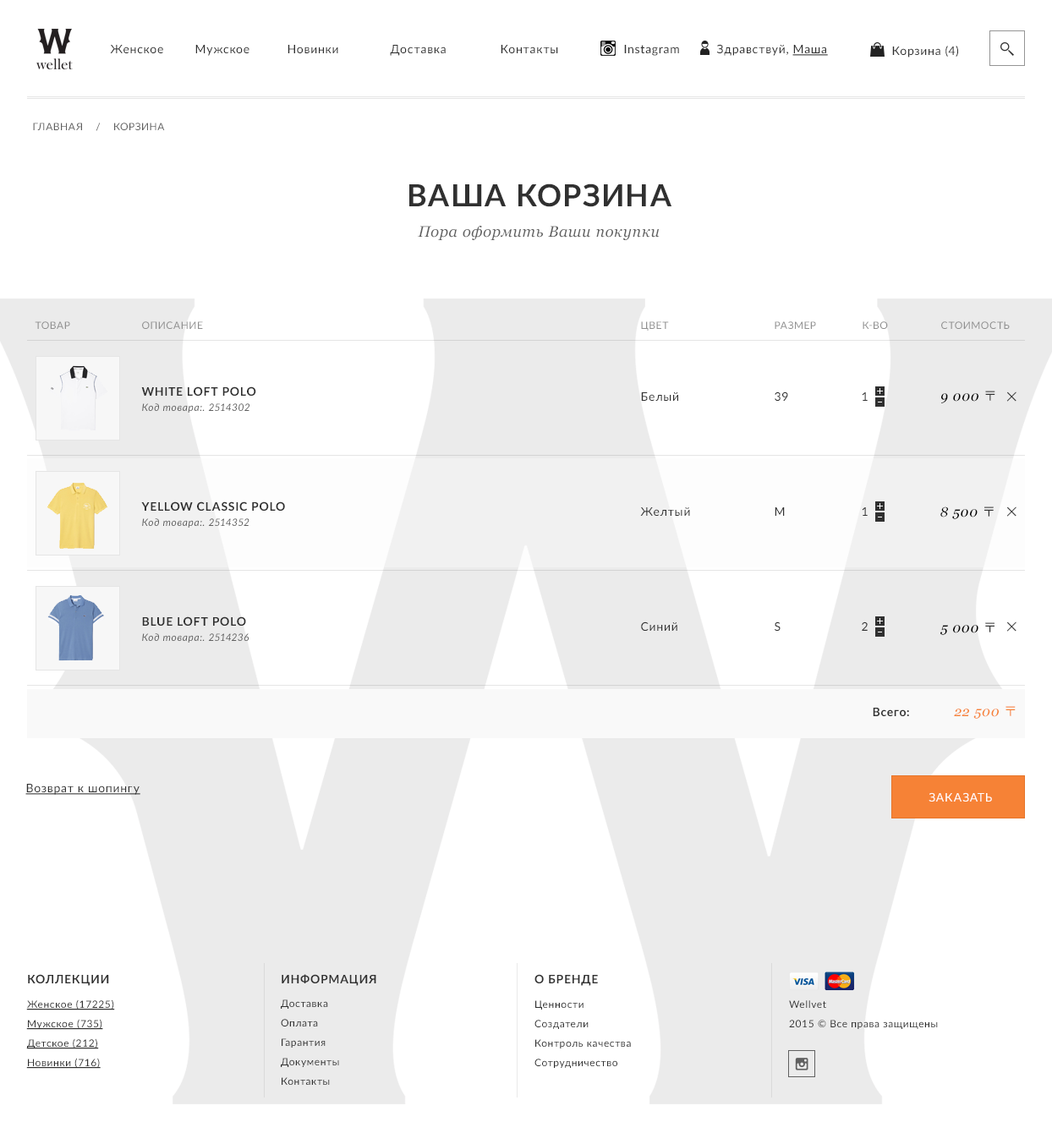
<style>
.page{position:relative;width:1052px;height:1133px;background:#ffffff}
.page>*{position:absolute;margin:0}
.t1{font:11.8px "Lato-Regular";letter-spacing:0.05em;color:#303030}
.t2{font:11.8px "Lato-Regular";letter-spacing:0.05em;color:#303030;text-decoration:underline}
.t3{font:10.1px "Lato-Regular";letter-spacing:0.05em;color:#606060;text-transform:uppercase}
.t4{font:15.2px/30.4px "Georgia-Italic";letter-spacing:0.05em;color:#606060}
.t5{font:30.4px/30.4px "Lato-Bold";letter-spacing:0.05em;color:#303030;text-transform:uppercase}
.t6{font:10.1px "Lato-Regular";letter-spacing:0.05em;color:#909090;text-transform:uppercase}
.t7{font:10.1px/15.2px "Lato-Italic";letter-spacing:0.05em;color:#606060}
.t8{font:11.8px/15.2px "Lato-Bold";letter-spacing:0.05em;color:#303030;text-transform:uppercase}
.t9{font:11.8px "Lato-Regular";letter-spacing:0.05em;color:#303030;text-transform:uppercase}
.t10{font:13.5px "Georgia-Italic";letter-spacing:0.05em;color:#000000}
.t11{font:13.5px "KozGoPr6N-Regular";letter-spacing:0.05em;color:#303030}
.t12{font:25.4px "Lato-Light";letter-spacing:0.05em;color:#303030;text-transform:uppercase}
.t13{font:11.8px "Lato-Bold";letter-spacing:0.05em;color:#303030}
.t14{font:13.5px "Georgia-Italic";letter-spacing:0.05em;color:#f68236}
.t15{font:13.5px "KozGoPr6N-Regular";letter-spacing:0.05em;color:#f68236}
.t16{font:11.8px "Lato-Regular";letter-spacing:0.05em;color:#ffffff;text-transform:uppercase}
.t17{font:11.8px "Lato-Bold";letter-spacing:0.05em;color:#303030;text-transform:uppercase}
.t18{font:10.1px/19.5px "Lato-Regular";letter-spacing:0.05em;color:#303030;text-decoration:underline}
.t19{font:10.1px/19.5px "Lato-Regular";letter-spacing:0.05em;color:#303030}
</style>
<div class="page">
<p class="t1" style="left:110px;top:45px;width:53px;height:8px">Женское</p>
<p class="t1" style="left:195px;top:45px;width:55px;height:11px">Мужское</p>
<p class="t1" style="left:288px;top:45px;width:50px;height:8px">Новинки</p>
<p class="t1" style="left:390px;top:45px;width:56px;height:11px">Доставка</p>
<p class="t1" style="left:501px;top:45px;width:57px;height:8px">Контакты</p>
<p class="t1" style="left:624px;top:45px;width:55px;height:11px">Instagram</p>
<p class="t1" style="left:717px;top:44px;width:111px;height:12px">Здравствуй, <span class="t2">Маша</span></p>
<p class="t1" style="left:892px;top:46px;width:66px;height:12px">Корзина (4)</p>
<p class="t3" style="left:33px;top:123px;width:132px;height:8px">главная    /    корзина</p>
<p class="t4" style="left:409px;top:184px;width:263px;height:56px;text-align:center"><span class="t5">   Ваша корзина<br></span>      Пора оформить Ваши покупки</p>
<p class="t6" style="left:35px;top:321px;width:35px;height:8px">товар</p>
<p class="t6" style="left:142px;top:321px;width:61px;height:8px">описание</p>
<p class="t6" style="left:641px;top:321px;width:28px;height:10px">Цвет</p>
<p class="t6" style="left:775px;top:321px;width:41px;height:8px">размер</p>
<p class="t6" style="left:863px;top:321px;width:25px;height:8px">к-во</p>
<p class="t6" style="left:941px;top:321px;width:69px;height:8px">стоимость</p>
<p class="t7" style="left:141px;top:387px;width:115px;height:26px"><span class="t8">white loft polo<br></span>Код товара:. 2514302</p>
<p class="t1" style="left:641px;top:392px;width:37px;height:9px">Белый</p>
<p class="t9" style="left:775px;top:392px;width:13px;height:9px">39</p>
<p class="t9" style="left:862px;top:392px;width:6px;height:9px">1</p>
<p class="t10" style="left:941px;top:391px;width:54px;height:12px">9 000 <span class="t11">〒</span></p>
<p class="t12" style="left:1006px;top:392px;width:11px;height:10px;rotate:45deg">+</p>
<p class="t7" style="left:141px;top:502px;width:144px;height:26px"><span class="t8">yellow classic polo<br></span>Код товара:. 2514352</p>
<p class="t1" style="left:640px;top:507px;width:50px;height:9px">Желтый</p>
<p class="t9" style="left:775px;top:507px;width:10px;height:9px">M</p>
<p class="t9" style="left:862px;top:507px;width:6px;height:9px">1</p>
<p class="t10" style="left:941px;top:507px;width:53px;height:12px">8 500 <span class="t11">〒</span></p>
<p class="t12" style="left:1006px;top:507px;width:11px;height:10px;rotate:45deg">+</p>
<p class="t7" style="left:142px;top:617px;width:107px;height:26px"><span class="t8">blue loft polo<br></span>Код товара:. 2514236</p>
<p class="t1" style="left:641px;top:622px;width:36px;height:9px">Синий</p>
<p class="t9" style="left:775px;top:622px;width:6px;height:9px">S</p>
<p class="t9" style="left:862px;top:622px;width:6px;height:9px">2</p>
<p class="t10" style="left:941px;top:622px;width:54px;height:13px">5 000 <span class="t11">〒</span></p>
<p class="t12" style="left:1006px;top:622px;width:11px;height:10px;rotate:45deg">+</p>
<p class="t13" style="left:873px;top:708px;width:36px;height:8px">Всего:</p>
<p class="t14" style="left:954px;top:706px;width:62px;height:13px">22 500 <span class="t15">〒</span></p>
<p class="t2" style="left:25px;top:784px;width:115px;height:11px">Возврат к шопингу</p>
<p class="t16" style="left:929px;top:792px;width:63px;height:10px">заказать</p>
<p class="t17" style="left:28px;top:974px;width:81px;height:12px">Коллекции</p>
<p class="t17" style="left:282px;top:974px;width:94px;height:12px">информация</p>
<p class="t17" style="left:535px;top:974px;width:63px;height:12px">о бренде</p>
<p class="t18" style="left:26px;top:1000px;width:89px;height:69px">Женское (17225)<br>Мужское (735)<br>Детское (212)<br>Новинки (716)</p>
<p class="t19" style="left:281px;top:1000px;width:58px;height:85px">Доставка<br>Оплата<br>Гарантия<br>Документы<br>Контакты</p>
<p class="t19" style="left:535px;top:1001px;width:96px;height:67px">Ценности<br>Создатели<br>Контроль качества<br>Сотрудничество</p>
<p class="t19" style="left:789px;top:1001px;width:149px;height:28px">Wellvet<br>2015 © Все права защищены</p>
</div>
